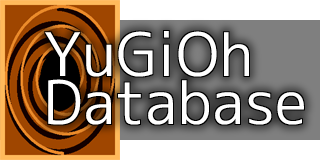
<style>
.page{position:relative;width:320px;height:160px;background:#ffffff}
.page>*{position:absolute;margin:0}
.t1{font:60px/48px "VL-PGothic-Regular";color:#ffffff}
</style>
<div class="page">
<p class="t1" style="left:45px;top:31px;width:259px;height:94px">YuGiOh<br>Database</p>
</div>
